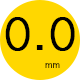
<style>
.page{position:relative;width:80px;height:80px;background:#ffd700}
.page>*{position:absolute;margin:0}
.t1{font:58px "Microsoft-Yi-Baiti";color:#000000;font-weight:bold}
.t2{font:12px "Microsoft-Yi-Baiti"}
</style>
<div class="page">
<p class="t1" style="left:5px;top:17px;width:70px;height:34px">0.0</p>
<p class="t2" style="left:45px;top:63px;width:15px;height:5px">mm</p>
</div>
